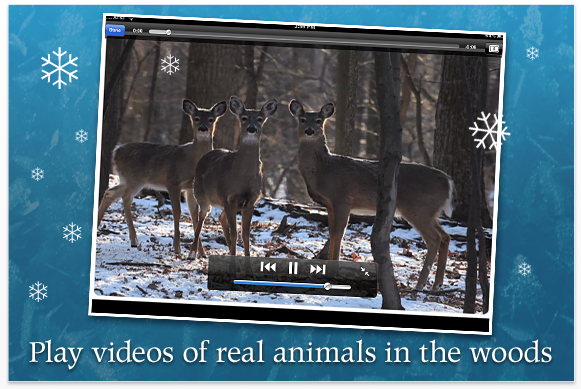
<style>
.page{position:relative;width:581px;height:389px}
.page>*{position:absolute;margin:0}
.t1{font:28px "PopplPontifexBE-Regular";color:#ffffff}
</style>
<div class="page">
<p class="t1" style="left:29px;top:339px;width:523px;height:31px">Play videos of real animals in the woods</p>
</div>
